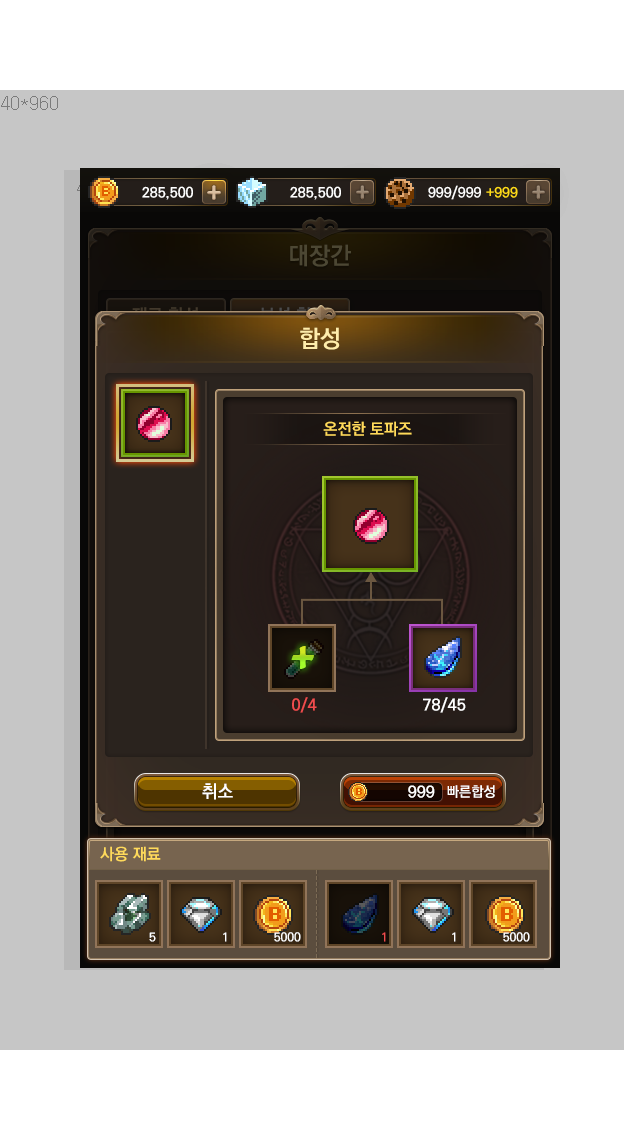
<style>
.page{position:relative;width:640px;height:1136px;background:#c6c6c6}
.page>*{position:absolute;margin:0}
.t1{font:24px "KoPubDotumBold";color:#4c4733}
.t2{font:24px "KoPubDotumBold";color:#ffedab}
.t3{font:16px "KoPubDotumBold";color:#ffda5b}
.t4{font:48px "CooperBlack";scale:0.96 1}
.t5{font:16px "KoPubDotumBold";color:#f04c4d}
.t6{font:16px "KoPubDotumBold";color:#ffffff}
.t7{font:18px "KoPubDotumBold";color:#ffffff}
.t8{font:14px "KoPubDotumBold";color:#ffffff}
.t9{font:12px "KoPubDotumBold";color:#ffffff}
.t10{font:12px "KoPubDotumBold";color:#f04c4d}
</style>
<div class="page">
<p class="t1" style="left:290px;top:244px;width:61px;height:23px">대장간</p>
<p class="t2" style="left:300px;top:327px;width:40px;height:23px">합성</p>
<p class="t3" style="left:323px;top:421px;width:89px;height:16px">온전한 토파즈</p>
<p class="t4" style="left:291px;top:646px;width:23px;height:23px">+</p>
<p class="t4" style="left:291px;top:646px;width:23px;height:23px">+</p>
<p class="t5" style="left:292px;top:697px;width:25px;height:16px">0/4</p>
<p class="t6" style="left:423px;top:697px;width:43px;height:16px">78/45</p>
<p class="t7" style="left:202px;top:783px;width:31px;height:17px">취소</p>
<p class="t6" style="left:408px;top:785px;width:27px;height:13px">999</p>
<p class="t8" style="left:447px;top:785px;width:48px;height:13px">빠른합성</p>
<p class="t3" style="left:100px;top:846px;width:61px;height:16px">사용 재료</p>
<p class="t9" style="left:149px;top:932px;width:7px;height:10px">5</p>
<p class="t9" style="left:223px;top:932px;width:4px;height:10px">1</p>
<p class="t9" style="left:274px;top:932px;width:27px;height:10px">5000</p>
<p class="t10" style="left:382px;top:932px;width:4px;height:10px">1</p>
<p class="t9" style="left:452px;top:932px;width:4px;height:10px">1</p>
<p class="t9" style="left:503px;top:932px;width:27px;height:10px">5000</p>
</div>
